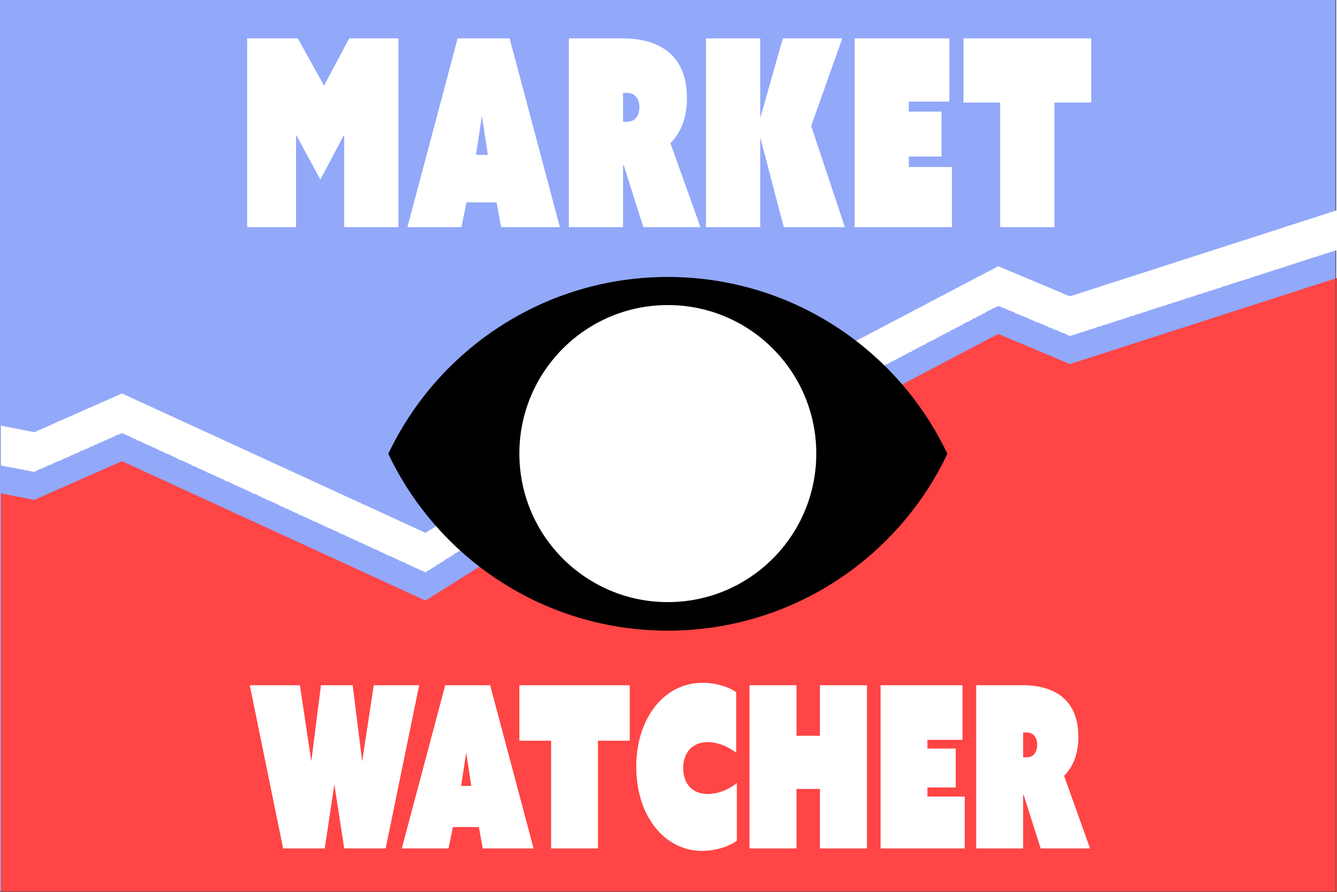
<style>
.page{position:relative;width:1337px;height:892px;background:#ff4545}
.page>*{position:absolute;margin:0}
.t1{font:260.5px "AzoSansUber-Regular";color:#ffffff;scale:0.7 1}
.t2{font:225px "AzoSansUber-Regular";color:#ffffff;scale:0.7 1}
</style>
<div class="page">
<p class="t1" style="left:247px;top:38px;width:845px;height:189px">Market</p>
<p class="t2" style="left:250px;top:683px;width:840px;height:168px">Watcher</p>
</div>
